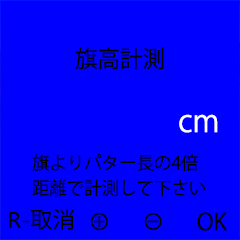
<style>
.page{position:relative;width:240px;height:240px;background:#0000ff}
.page>*{position:absolute;margin:0}
.t1{font:23.1px "KozGoPr6N-Regular";color:#000000}
.t2{font:30.8px "KozGoPr6N-Regular";color:#ffffff;scale:0.97 1}
.t3{font:17.7px/25.3px "KozGoPr6N-Regular";color:#000000}
.t4{font:22.3px "MicrosoftNewTaiLue";color:#000000}
.t5{font:22.3px "KozGoPr6N-Regular";color:#000000}
.t6{font:22.5px "KozGoPr6N-Regular";color:#000000}
</style>
<div class="page">
<p class="t1" style="left:75px;top:47px;width:89px;height:23px">旗高計測</p>
<p class="t2" style="left:179px;top:114px;width:39px;height:19px">cm</p>
<p class="t3" style="left:32px;top:154px;width:174px;height:43px">旗よりパター長の4倍<br>距離で計測して下さい</p>
<p class="t4" style="left:9px;top:208px;width:66px;height:22px">R-<span class="t5">取消</span></p>
<p class="t1" style="left:91px;top:212px;width:17px;height:19px">⊕</p>
<p class="t6" style="left:144px;top:213px;width:18px;height:17px">⊖</p>
<p class="t1" style="left:197px;top:212px;width:30px;height:19px">OK</p>
</div>
